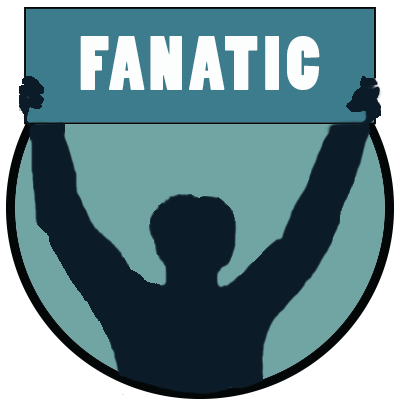
<style>
.page{position:relative;width:400px;height:400px;background:#71a5a3}
.page>*{position:absolute;margin:0}
.t1{font:72px "PoplarStd";letter-spacing:0.07em;color:#fcfdfd}
</style>
<div class="page">
<p class="t1" style="left:80px;top:36px;width:240px;height:54px">FANATIC</p>
</div>
